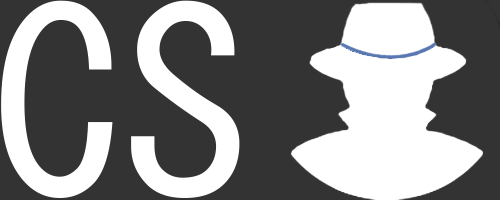
<style>
.page{position:relative;width:500px;height:200px;background:#333333}
.page>*{position:absolute;margin:0}
.t1{font:258.7px "MS-Gothic";color:#ffffff}
</style>
<div class="page">
<p class="t1" style="left:1px;top:0px;width:239px;height:198px">CS</p>
</div>
